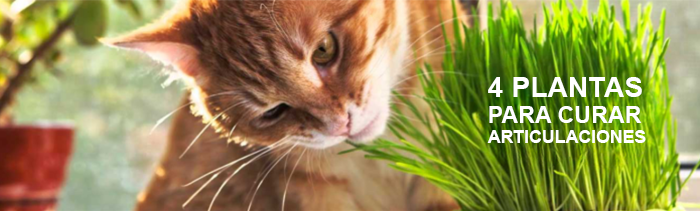
<style>
.page{position:relative;width:700px;height:211px}
.page>*{position:absolute;margin:0}
.t1{font:17.5px/20px "Arial-BoldMT";letter-spacing:0.008em;color:#ffffff}
.t2{font:28px/18px "Arial-BoldMT";letter-spacing:0.008em;color:#ffffff}
.t3{font:23px/26px "Arial-BoldMT";letter-spacing:0.008em;color:#ffffff}
</style>
<div class="page">
<p class="t1" style="left:487px;top:77px;width:159px;height:66px"><span class="t2">4 PLANTAS <br></span><span class="t3">PARA CURAR <br></span>ARTICULACIONES</p>
</div>
